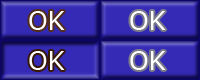
<style>
.page{position:relative;width:200px;height:80px;background:#342ab6}
.page>*{position:absolute;margin:0}
.t1{font:25px "MSReferenceSansSerif";color:#ffffff}
</style>
<div class="page">
<p class="t1" style="left:29px;top:11px;width:36px;height:19px">OK</p>
<p class="t1" style="left:130px;top:11px;width:36px;height:19px">OK</p>
<p class="t1" style="left:29px;top:51px;width:36px;height:19px">OK</p>
<p class="t1" style="left:130px;top:51px;width:36px;height:19px">OK</p>
</div>
